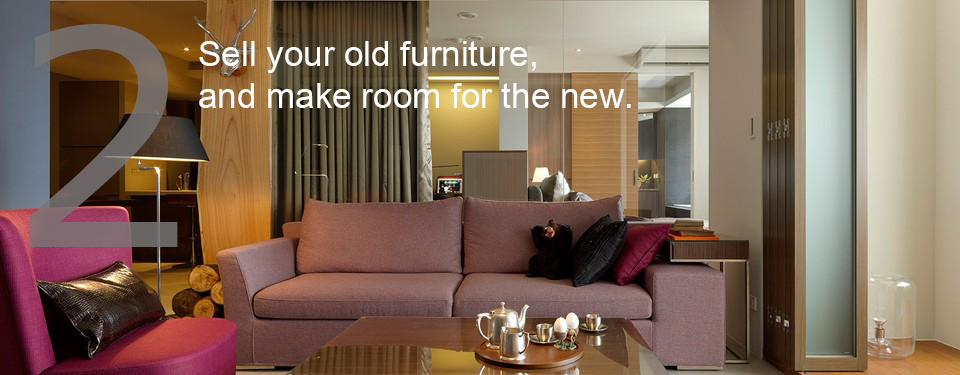
<style>
.page{position:relative;width:960px;height:375px}
.page>*{position:absolute;margin:0}
.t1{font:300px "Verdana";color:#787575}
.t2{font:35px "ArialUnicodeMS";color:#ffffff}
</style>
<div class="page">
<p class="t1" style="left:29px;top:24px;width:149px;height:223px;opacity:0.8">2</p>
<p class="t2" style="left:199px;top:41px;width:432px;height:67px">Sell your old furniture,<br>and make room for the new.</p>
</div>
